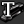
<style>
.page{position:relative;width:24px;height:24px;background:#333333}
.page>*{position:absolute;margin:0}
.t1{font:19px "LucidaBright";color:#ffffff;font-weight:bold}
</style>
<div class="page">
<p class="t1" style="left:2px;top:2px;width:13px;height:15px">T</p>
</div>
